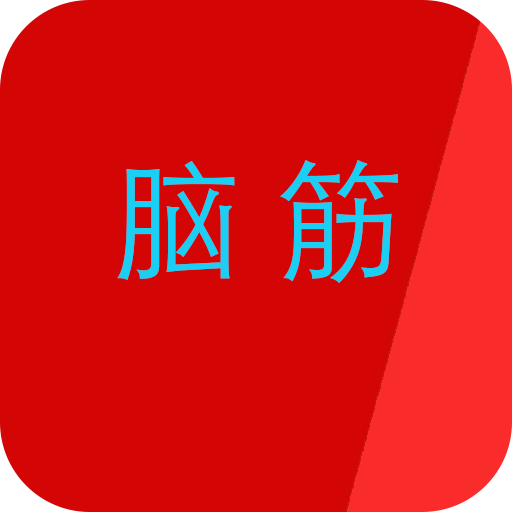
<style>
.page{position:relative;width:512px;height:512px;background:#d30505}
.page>*{position:absolute;margin:0}
.t1{font:130px "STHeitiSC-Light";color:#1acef4}
.t2{font:130px "CooperBlack";color:#1acef4}
</style>
<div class="page">
<p class="t1" style="left:117px;top:160px;width:281px;height:123px"><span class="t2"> </span>脑 筋</p>
</div>
